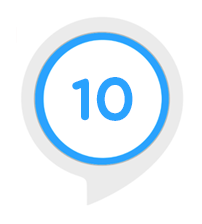
<style>
.page{position:relative;width:202px;height:224px;background:#ffffff}
.page>*{position:absolute;margin:0}
.t1{font:60px "Multicolore";color:#2aa2fe}
</style>
<div class="page">
<p class="t1" style="left:72px;top:77px;width:61px;height:44px">10</p>
</div>
